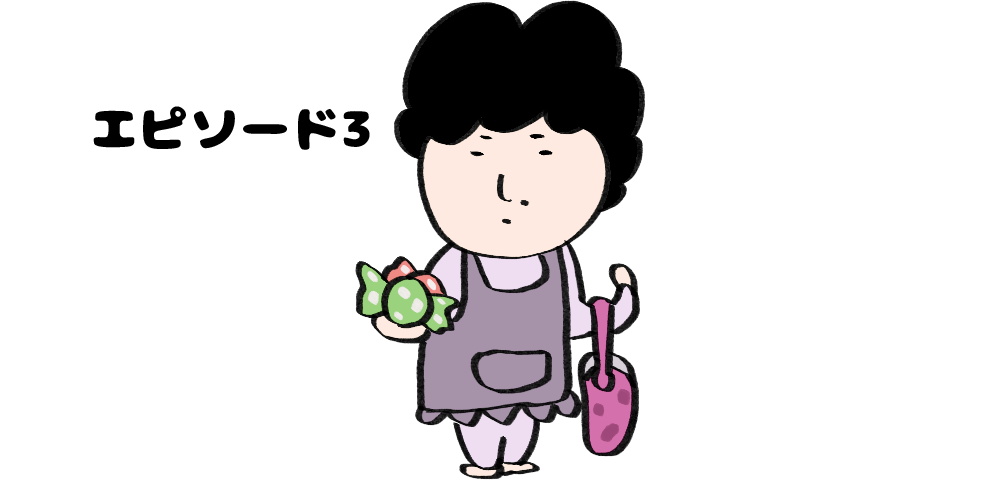
<style>
.page{position:relative;width:1000px;height:480px;background:#ffffff}
.page>*{position:absolute;margin:0}
.t1{font:50px "07NikumaruFont";letter-spacing:0.08em;color:#000000}
</style>
<div class="page">
<p class="t1" style="left:93px;top:106px;width:277px;height:44px">エピソード3</p>
</div>
